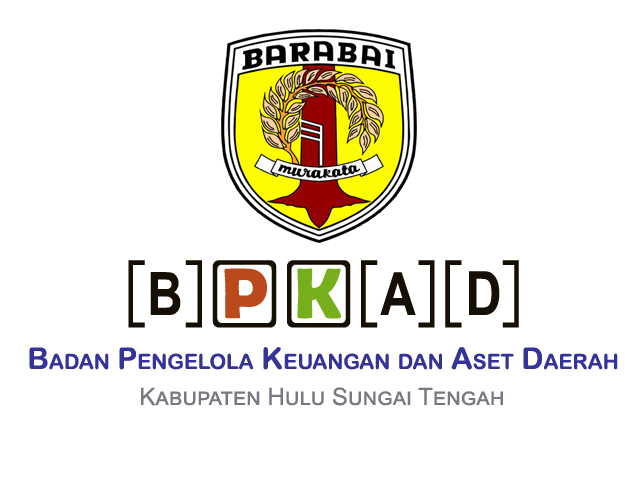
<style>
.page{position:relative;width:640px;height:480px;background:#ffffff}
.page>*{position:absolute;margin:0}
.t1{font:30px "ArialRoundedMTBold";color:#333399;font-variant:small-caps}
.t2{font:24px "ArialMT";color:#787882;font-variant:small-caps}
</style>
<div class="page">
<p class="t1" style="left:29px;top:347px;width:589px;height:23px">Badan Pengelola Keuangan dan Aset Daerah</p>
<p class="t2" style="left:141px;top:387px;width:362px;height:19px">Kabupaten Hulu Sungai Tengah</p>
</div>
